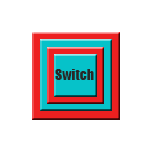
<style>
.page{position:relative;width:150px;height:150px;background:#ffffff}
.page>*{position:absolute;margin:0}
.t1{font:14px "Impact";color:#282828}
</style>
<div class="page">
<p class="t1" style="left:55px;top:69px;width:39px;height:11px">Switch</p>
</div>
